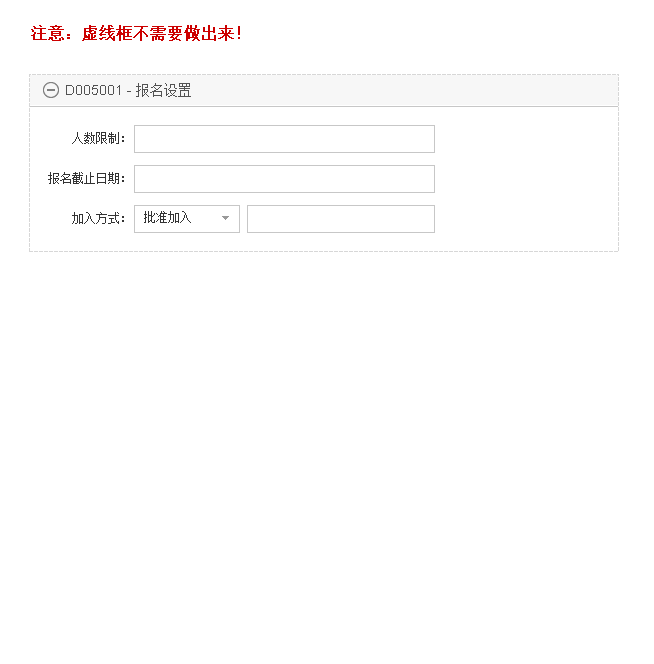
<style>
.page{position:relative;width:654px;height:664px;background:#ffffff}
.page>*{position:absolute;margin:0}
.t1{font:16px "SimSun";color:#cc0000;font-weight:bold}
.t2{font:14px "ArialMT";color:#525252}
.t3{font:14px "SimSun";color:#525252}
.t4{font:12px "SimSun";color:#333333}
</style>
<div class="page">
<p class="t1" style="left:31px;top:25px;width:209px;height:16px">注意：虚线框不需要做出来！</p>
<p class="t2" style="left:66px;top:83px;width:125px;height:14px">D005001 - <span class="t3">报名设置</span></p>
<p class="t4" style="left:72px;top:132px;width:52px;height:12px">人数限制：</p>
<p class="t4" style="left:48px;top:172px;width:76px;height:12px">报名截止日期：</p>
<p class="t4" style="left:72px;top:212px;width:52px;height:12px">加入方式：</p>
<p class="t4" style="left:144px;top:211px;width:47px;height:12px">批准加入</p>
</div>
